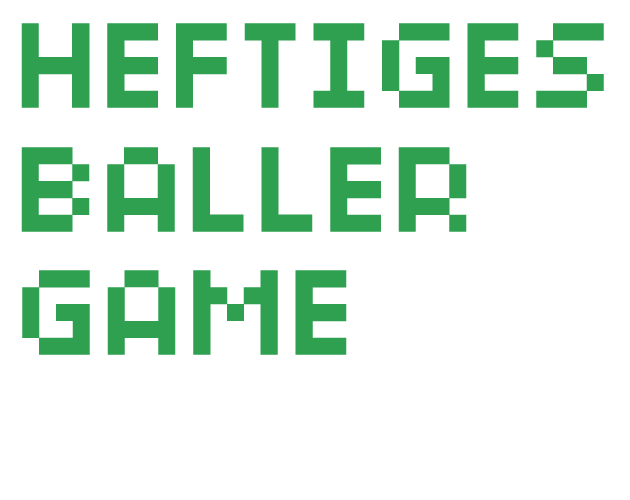
<style>
.page{position:relative;width:630px;height:500px;background:#ffffff}
.page>*{position:absolute;margin:0}
.t1{font:134.7px "04b03";letter-spacing:0.01em;color:#2ea04f}
</style>
<div class="page">
<p class="t1" style="left:21px;top:23px;width:583px;height:85px">HEFTIGES</p>
<p class="t1" style="left:21px;top:147px;width:446px;height:85px">BALLER</p>
<p class="t1" style="left:22px;top:270px;width:325px;height:85px">GAME</p>
</div>
